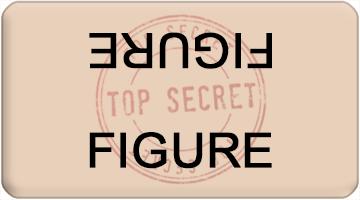
<style>
.page{position:relative;width:360px;height:200px;background:#e8d0bb}
.page>*{position:absolute;margin:0}
.t1{font:48px "ArialMT";color:#000000;font-weight:bold}
</style>
<div class="page">
<p class="t1" style="left:89px;top:32px;width:183px;height:37px;rotate:180deg">FIGURE</p>
<p class="t1" style="left:89px;top:132px;width:183px;height:37px">FIGURE</p>
</div>
